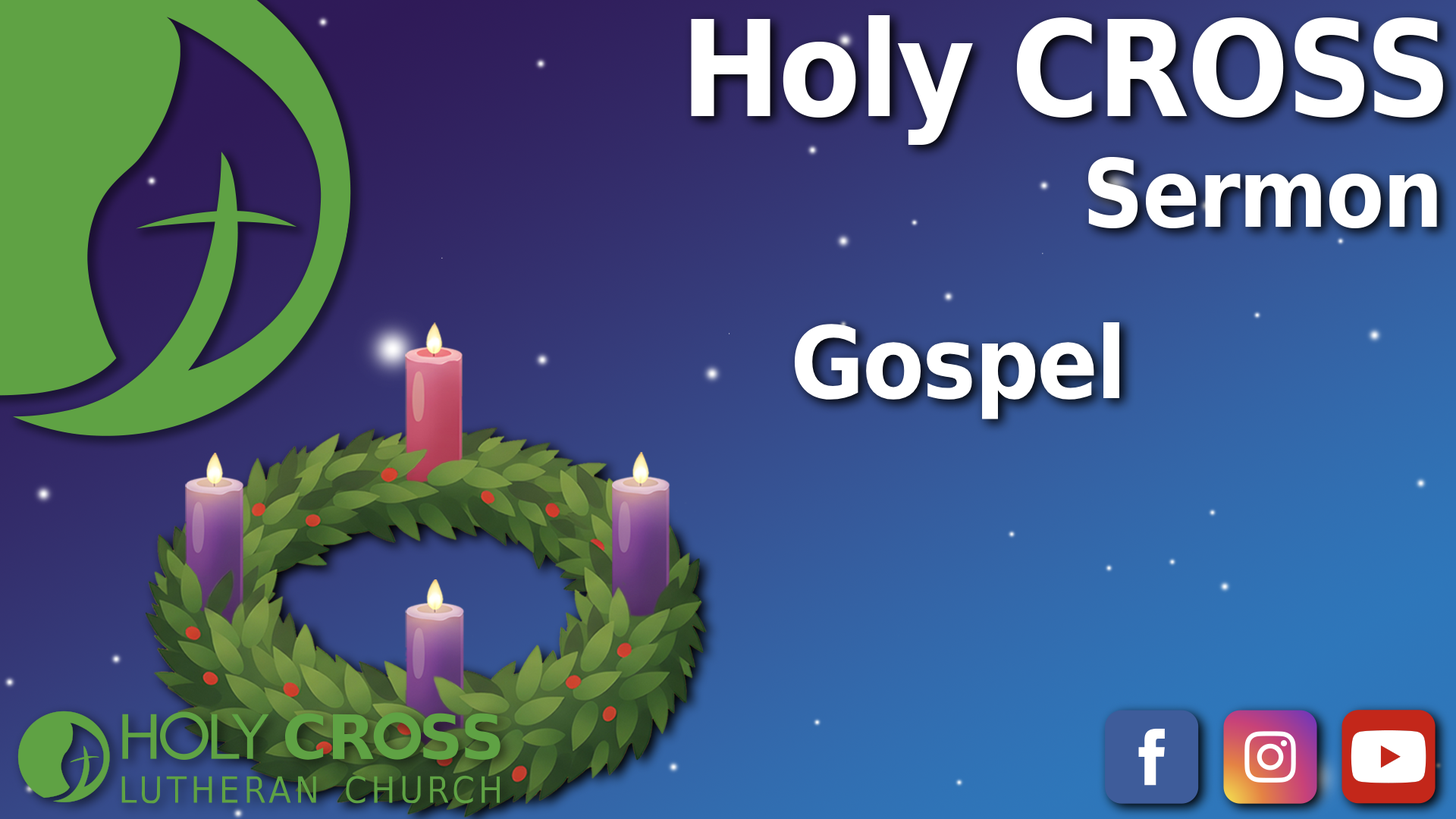
<style>
.page{position:relative;width:1456px;height:819px}
.page>*{position:absolute;margin:0}
.t1{font:132.8px "DejaVuSans-Bold";letter-spacing:-0.025em;color:#ffffff;scale:0.91 1}
.t2{font:94.4px "DejaVuSans-Bold";letter-spacing:-0.025em;color:#ffffff;scale:0.91 1}
.t3{font:99.8px "DejaVuSans-Bold";letter-spacing:-0.025em;color:#ffffff;scale:0.91 1}
</style>
<div class="page">
<p class="t1" style="left:691px;top:15px;width:752px;height:130px">Holy CROSS</p>
<p class="t2" style="left:1088px;top:157px;width:349px;height:71px">Sermon</p>
<p class="t3" style="left:794px;top:322px;width:325px;height:97px">Gospel</p>
</div>
